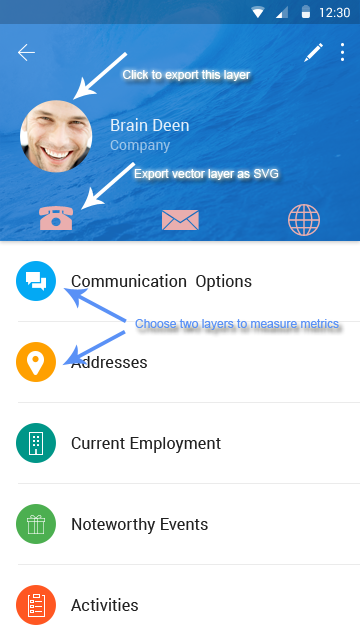
<style>
.page{position:relative;width:360px;height:640px;background:#ffffff}
.page>*{position:absolute;margin:0}
.t1{font:12.7px "Roboto-Regular";color:#ffffff}
.t2{font:12px "ArialMT";color:#ffffff}
.t3{font:16px "Roboto-Regular";letter-spacing:0.01em;color:#e3eff9}
.t4{font:14px "Roboto-Regular";letter-spacing:0.01em;color:#98c3e8}
.t5{font:16px "Roboto-Regular";letter-spacing:0.01em;color:#212121}
.t6{font:12px "ArialMT";color:#5a91f6}
</style>
<div class="page">
<p class="t1" style="left:320px;top:7px;width:30px;height:11px">12:30</p>
<p class="t2" style="left:123px;top:70px;width:128px;height:11px">Click to export this layer</p>
<p class="t3" style="left:111px;top:118px;width:78px;height:13px">Brain Deen</p>
<p class="t4" style="left:110px;top:140px;width:61px;height:13px">Company</p>
<p class="t2" style="left:134px;top:169px;width:145px;height:11px">Export vector layer as SVG</p>
<p class="t5" style="left:71px;top:274px;width:181px;height:17px">Communication  Options</p>
<p class="t6" style="left:135px;top:319px;width:204px;height:11px">Choose two layers to measure metrics</p>
<p class="t5" style="left:71px;top:356px;width:76px;height:12px">Addresses</p>
<p class="t5" style="left:71px;top:437px;width:150px;height:16px">Current Employment</p>
<p class="t5" style="left:72px;top:518px;width:136px;height:16px">Noteworthy Events</p>
<p class="t5" style="left:71px;top:598px;width:67px;height:13px">Activities</p>
</div>
